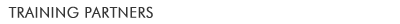
<style>
.page{position:relative;width:400px;height:24px;background:#ffffff}
.page>*{position:absolute;margin:0}
.t1{font:14.7px "FuturaBT-Light";letter-spacing:0.025em;color:#363636;text-transform:uppercase;font-weight:bold}
</style>
<div class="page">
<p class="t1" style="left:8px;top:6px;width:145px;height:12px">TRAINING PARTNERS</p>
</div>
